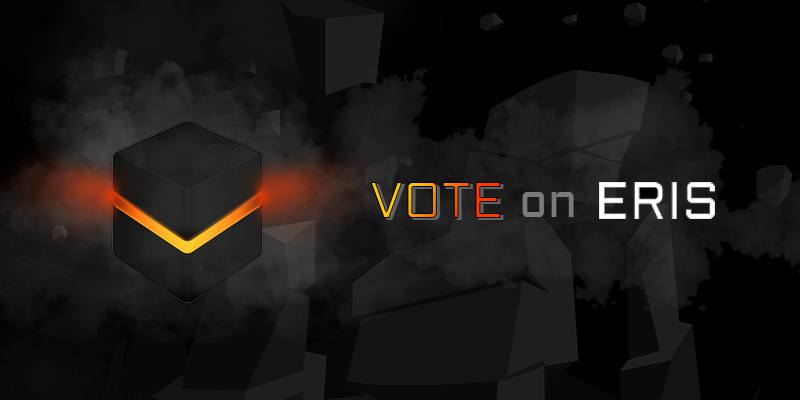
<style>
.page{position:relative;width:800px;height:400px}
.page>*{position:absolute;margin:0}
.t1{font:52.2px "Aldrich-Regular";scale:0.93 1}
.t2{font:47.3px "Aldrich-Regular";color:#7b7b7b}
</style>
<div class="page">
<p class="t1" style="left:370px;top:182px;width:131px;height:36px">VOTE</p>
<p class="t2" style="left:522px;top:192px;width:52px;height:25px">on</p>
</div>
